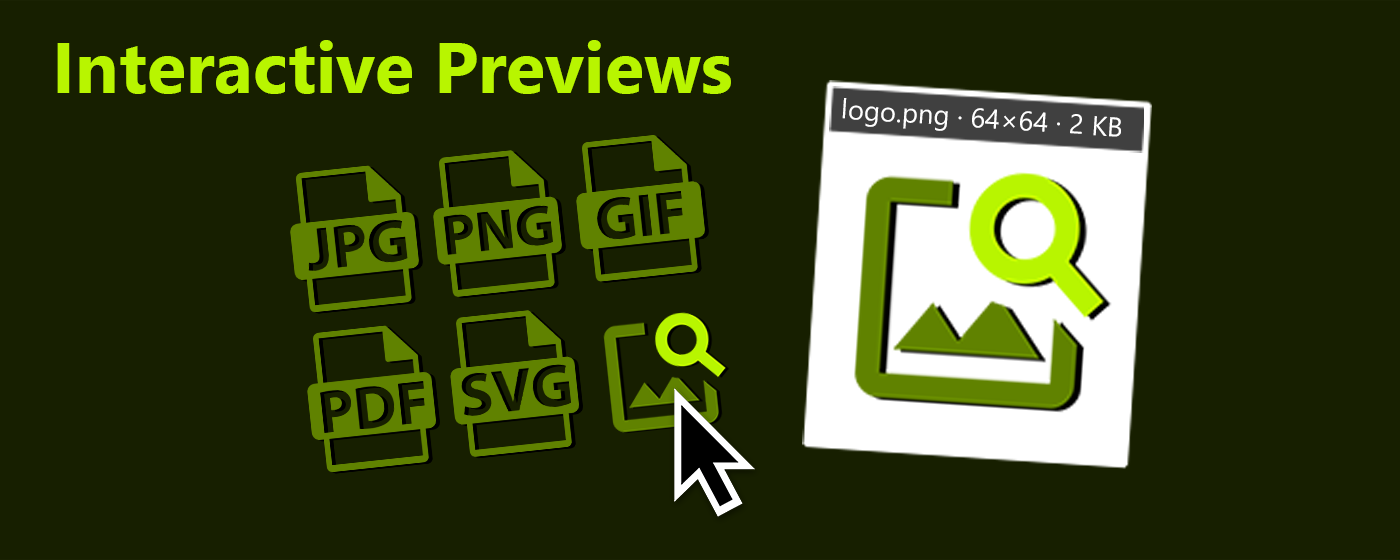
<style>
.page{position:relative;width:1400px;height:560px;background:#171f00}
.page>*{position:absolute;margin:0}
.t1{font:72.1px "SegoeUI-Bold";color:#b8f500}
.t2{font:27.4px "SegoeUI";color:#ffffff}
</style>
<div class="page">
<p class="t1" style="left:57px;top:40px;width:674px;height:54px">Interactive Previews</p>
<p class="t2" style="left:842px;top:98px;width:279px;height:39px;rotate:4deg">logo.png · 64×64 · 2 KB</p>
</div>
